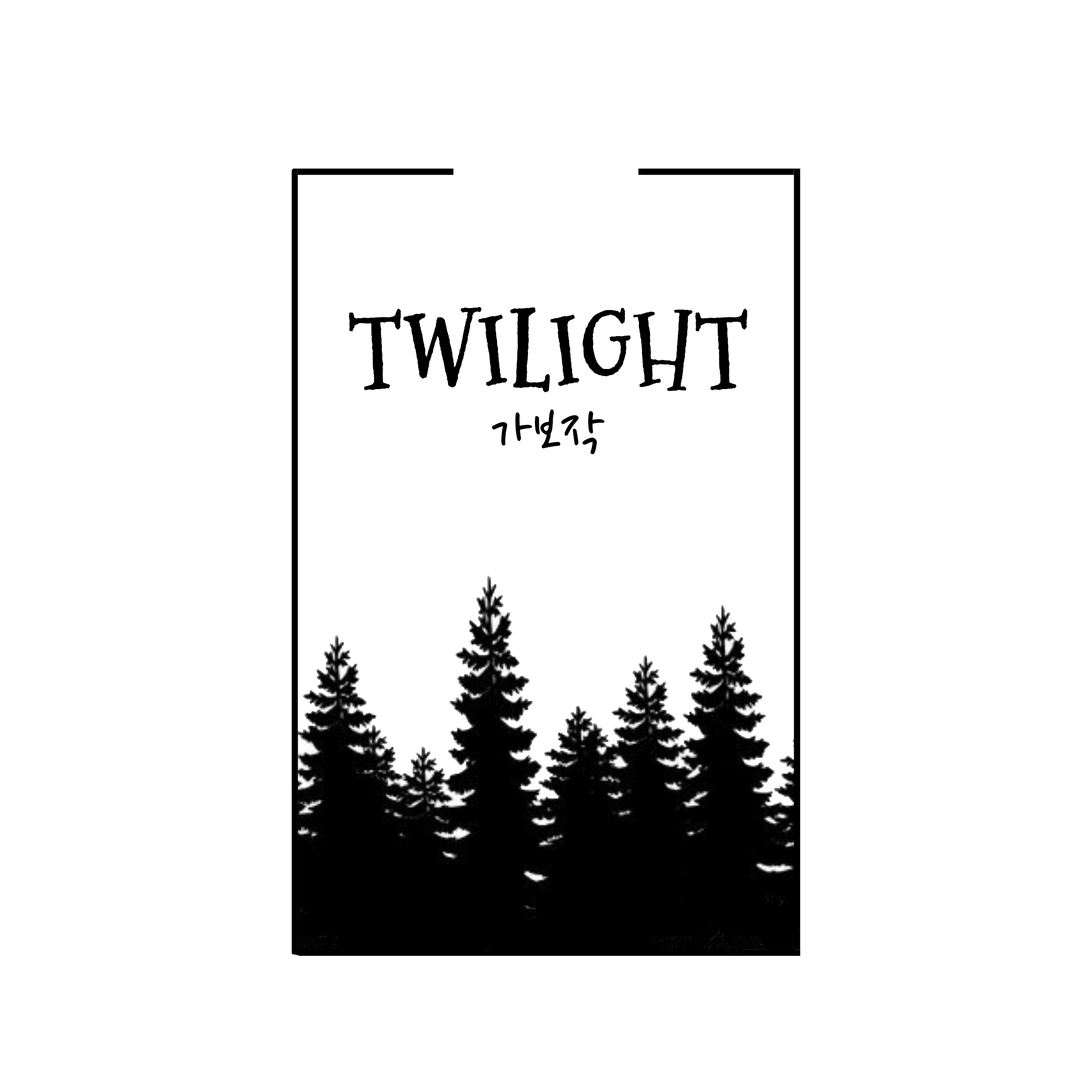
<style>
.page{position:relative;width:1092px;height:1092px;background:#ffffff}
.page>*{position:absolute;margin:0}
.t1{font:102.4px "MountainsofChristmas-Bold";color:#000000}
.t2{font:64px "NanumPen-Regular";color:#000000}
</style>
<div class="page">
<p class="t1" style="left:348px;top:307px;width:399px;height:85px">TWILIGHT</p>
<p class="t2" style="left:492px;top:409px;width:112px;height:45px">가보작</p>
</div>
